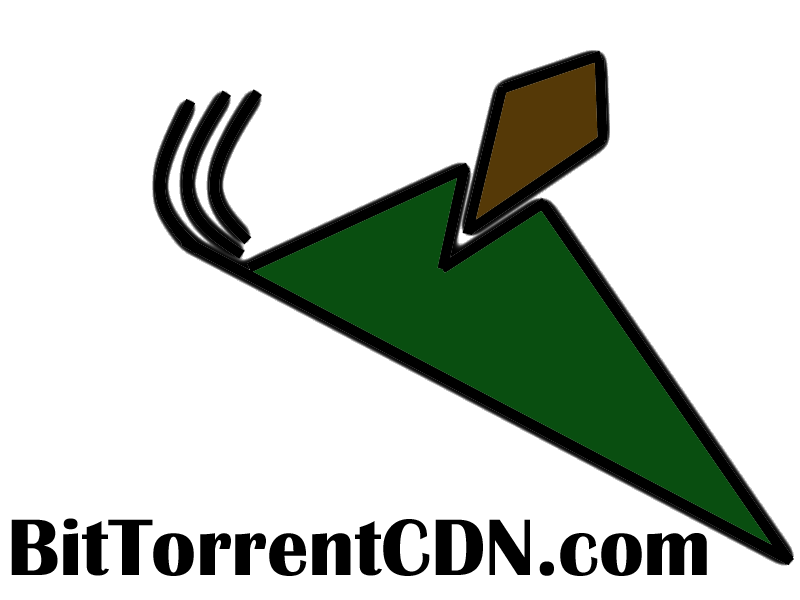
<style>
.page{position:relative;width:800px;height:600px;background:#ffffff}
.page>*{position:absolute;margin:0}
.t1{font:82.7px "BritannicBold";color:#000000}
</style>
<div class="page">
<p class="t1" style="left:11px;top:518px;width:696px;height:58px">BitTorrentCDN.com</p>
</div>
